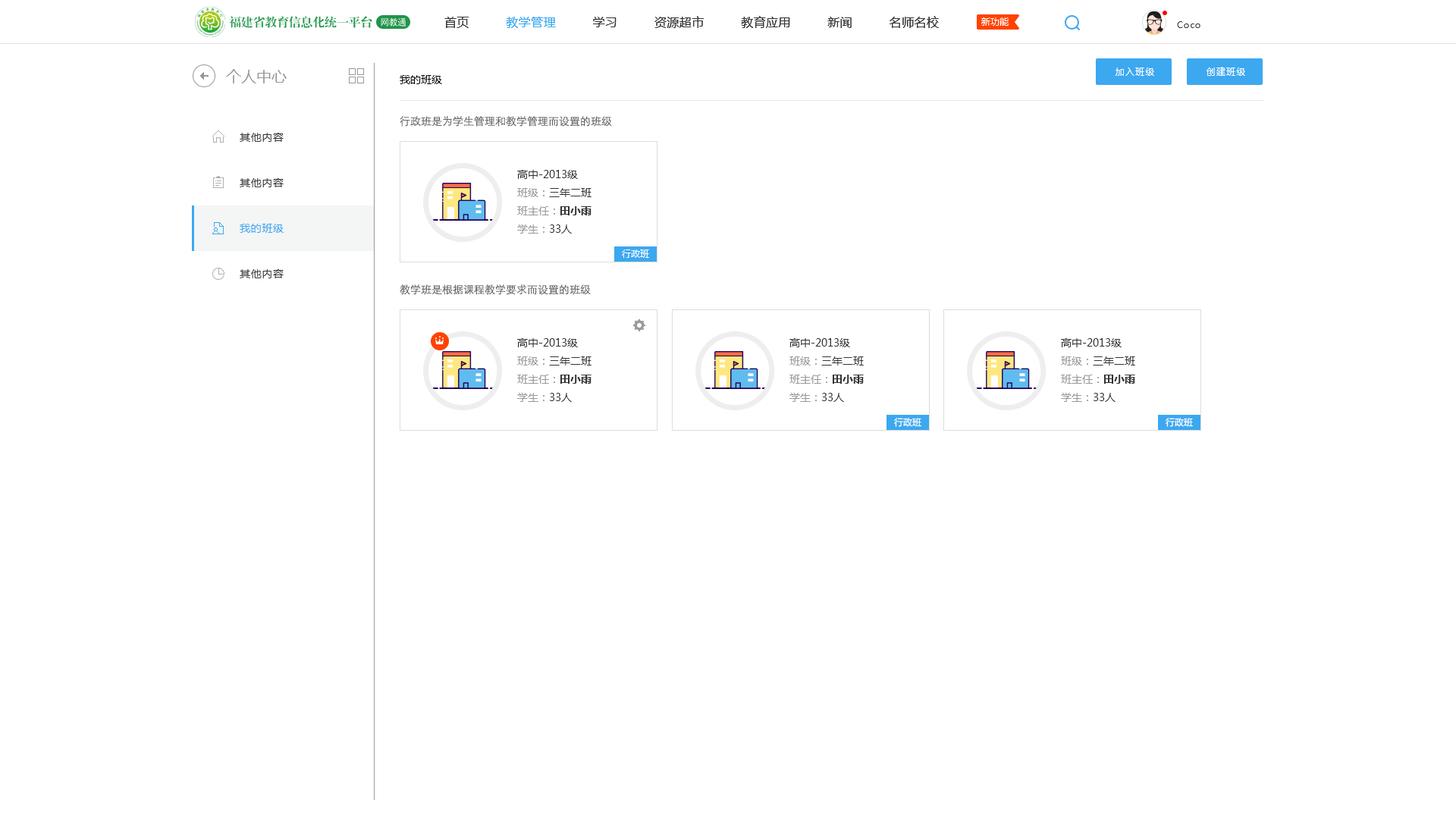
<style>
.page{position:relative;width:1456px;height:819px;background:#ffffff}
.page>*{position:absolute;margin:0}
.t1{font:9.1px "AdobeHeitiStd-Regular";letter-spacing:-0.05em;color:#ffffff}
.t2{font:12.1px "MicrosoftYaHei";letter-spacing:0.025em;color:#333333}
.t3{font:12.1px "MicrosoftYaHei";letter-spacing:0.025em;color:#3ba8f0}
.t4{font:9.1px "MicrosoftYaHei";color:#ffffff}
.t5{font:9.1px "MicrosoftYaHei";letter-spacing:0.05em;color:#333333}
.t6{font:15.2px "MicrosoftYaHei";color:#999999}
.t7{font:10.6px "MicrosoftYaHei";color:#000000}
.t8{font:9.1px "MicrosoftYaHei";letter-spacing:0.1em;color:#ffffff}
.t9{font:10.6px "STXihei";color:#666666}
.t10{font:10.6px/45.5px "MicrosoftYaHei";letter-spacing:0.05em;color:#333333}
.t11{font:10.6px/45.5px "MicrosoftYaHei";letter-spacing:0.05em;color:#3ba8f0}
.t12{font:10.6px/18.2px "MicrosoftYaHei";color:#333333}
.t13{font:10.6px/18.2px "MicrosoftYaHei";color:#999999}
.t14{font:10.6px/18.2px "MicrosoftYaHei-Bold";color:#333333}
</style>
<div class="page">
<p class="t1" style="left:381px;top:17px;width:25px;height:10px">网教通</p>
<p class="t2" style="left:444px;top:16px;width:495px;height:12px">首页         <span class="t3">教学管理</span>         学习         资源超市         教育应用         新闻         名师名校</p>
<p class="t4" style="left:981px;top:17px;width:28px;height:9px">新功能</p>
<p class="t5" style="left:1177px;top:21px;width:23px;height:7px">Coco</p>
<p class="t6" style="left:226px;top:69px;width:61px;height:14px">个人中心</p>
<p class="t7" style="left:400px;top:75px;width:42px;height:9px">我的班级</p>
<p class="t8" style="left:1115px;top:67px;width:39px;height:9px">加入班级</p>
<p class="t8" style="left:1206px;top:67px;width:39px;height:9px">创建班级</p>
<p class="t9" style="left:400px;top:116px;width:212px;height:11px">行政班是为学生管理和教学管理而设置的班级</p>
<p class="t10" style="left:240px;top:133px;width:44px;height:145px">其他内容<br>其他内容<br><span class="t11">我的班级<br></span>其他内容</p>
<p class="t12" style="left:517px;top:170px;width:74px;height:64px">高中-2013级<br><span class="t13">班级：</span>三年二班<br><span class="t13">班主任：</span><span class="t14">田小雨<br></span><span class="t13">学生：</span>33人</p>
<p class="t4" style="left:622px;top:249px;width:27px;height:9px">行政班</p>
<p class="t9" style="left:400px;top:284px;width:191px;height:11px">教学班是根据课程教学要求而设置的班级</p>
<p class="t12" style="left:517px;top:338px;width:74px;height:64px">高中-2013级<br><span class="t13">班级：</span>三年二班<br><span class="t13">班主任：</span><span class="t14">田小雨<br></span><span class="t13">学生：</span>33人</p>
<p class="t12" style="left:789px;top:338px;width:75px;height:64px">高中-2013级<br><span class="t13">班级：</span>三年二班<br><span class="t13">班主任：</span><span class="t14">田小雨<br></span><span class="t13">学生：</span>33人</p>
<p class="t12" style="left:1061px;top:338px;width:74px;height:64px">高中-2013级<br><span class="t13">班级：</span>三年二班<br><span class="t13">班主任：</span><span class="t14">田小雨<br></span><span class="t13">学生：</span>33人</p>
<p class="t4" style="left:894px;top:418px;width:27px;height:9px">行政班</p>
<p class="t4" style="left:1166px;top:418px;width:27px;height:9px">行政班</p>
</div>
